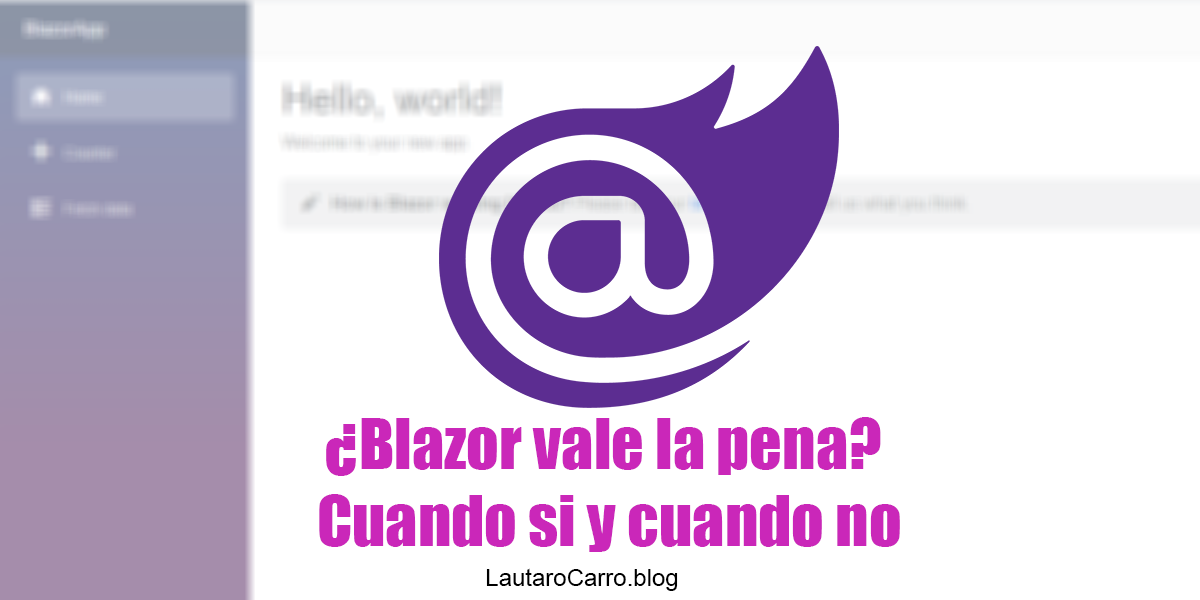
<style>
.page{position:relative;width:1200px;height:600px;background:#ffffff}
.page>*{position:absolute;margin:0}
.t1{font:64px "Impact";color:#ca27b9}
.t2{font:24px "ArialMT";color:#000000}
</style>
<div class="page">
<p class="t1" style="left:319px;top:417px;width:581px;height:135px;text-align:center">¿Blazor vale la pena? <br>Cuando si y cuando no</p>
<p class="t2" style="left:486px;top:568px;width:192px;height:23px">LautaroCarro.blog</p>
</div>
